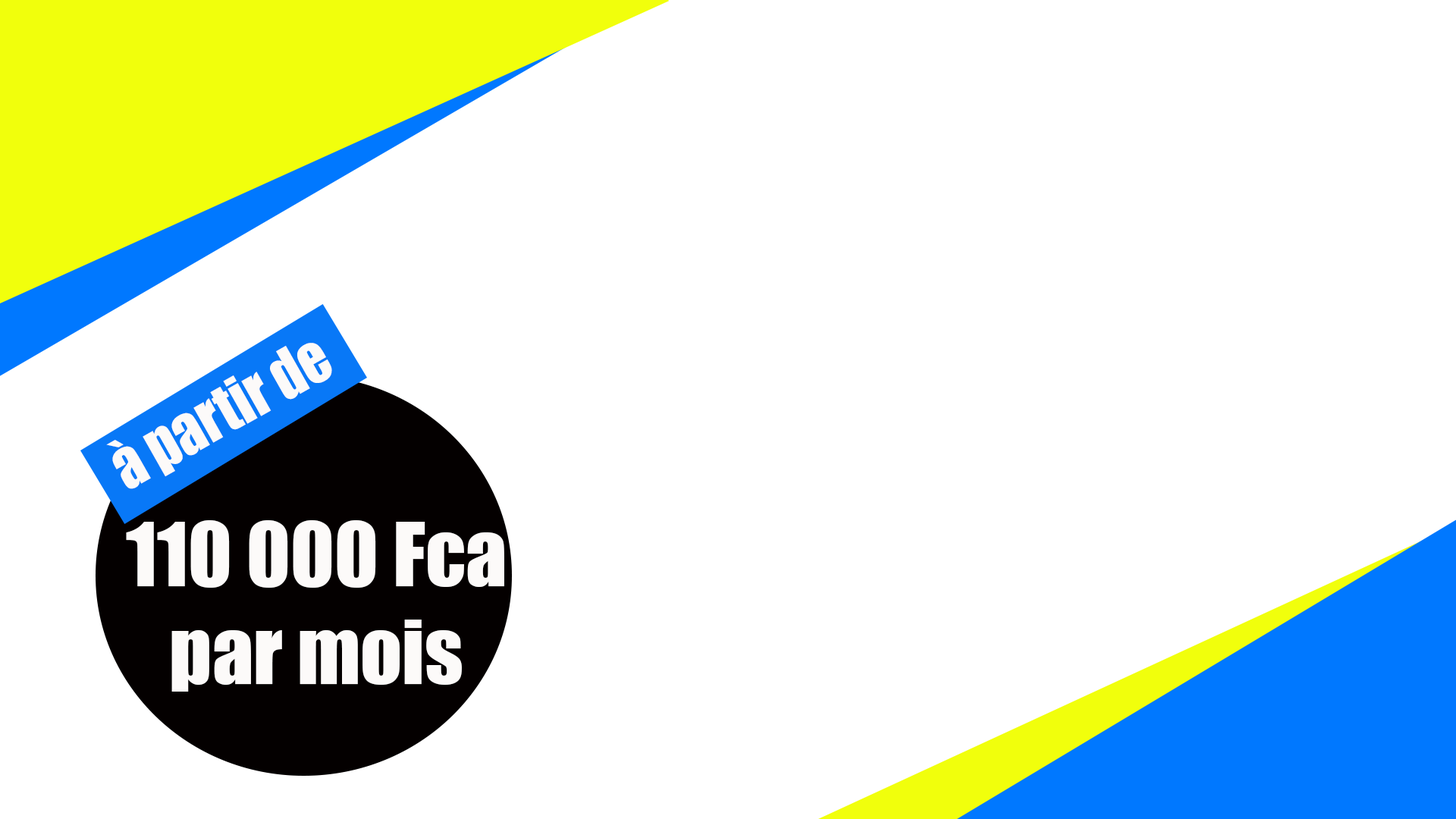
<style>
.page{position:relative;width:1456px;height:819px;background:#ffffff}
.page>*{position:absolute;margin:0}
.t1{font:62px "Impact";color:#fcfaf9;scale:0.92 1}
.t2{font:81.9px "Impact";color:#fcfaf9}
</style>
<div class="page">
<p class="t1" style="left:106px;top:343px;width:226px;height:146px;rotate:-29deg">à partir de</p>
<p class="t2" style="left:126px;top:520px;width:378px;height:172px;text-align:center">110 000 Fca<br>par mois</p>
</div>
